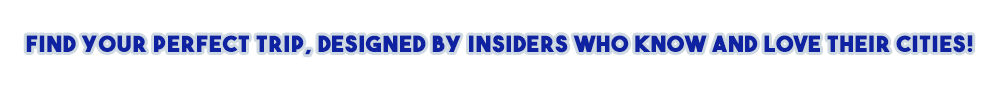
<style>
.page{position:relative;width:1000px;height:90px;background:#ffffff}
.page>*{position:absolute;margin:0}
.t1{font:21.9px "TheBoldFont";letter-spacing:0.05em;color:#0f23a2;font-weight:bold}
</style>
<div class="page">
<p class="t1" style="left:26px;top:35px;width:947px;height:20px">Find your perfect trip, designed by insiders who know and love their cities!</p>
</div>
